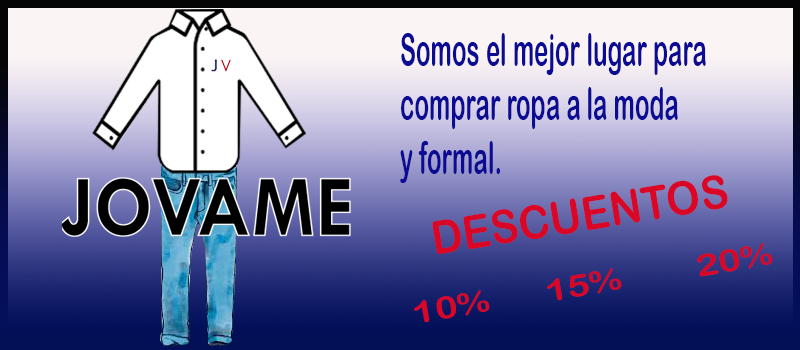
<style>
.page{position:relative;width:800px;height:350px}
.page>*{position:absolute;margin:0}
.t1{font:45.2px "ArialRoundedMTBold";color:#0b0b93;scale:0.53 1}
.t2{font:46.2px "ArialRoundedMTBold";color:#d90725;scale:0.92 1}
.t3{font:30.4px "ArialRoundedMTBold";color:#d90725;scale:1.24 1}
</style>
<div class="page">
<p class="t1" style="left:400px;top:33px;width:306px;height:150px">Somos el mejor lugar para <br>comprar ropa a la moda <br>y formal.</p>
<p class="t2" style="left:432px;top:175px;width:296px;height:79px;rotate:-9deg">DESCUENTOS</p>
<p class="t3" style="left:414px;top:243px;width:359px;height:80px;rotate:-9deg">10%      15%        20%</p>
</div>
